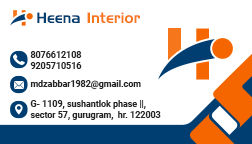
<style>
.page{position:relative;width:252px;height:144px;background:#ffffff}
.page>*{position:absolute;margin:0}
.t1{font:14.8px "HandelGothic";color:#f6761b}
.t2{font:14.8px "HandelGothic";color:#003e71}
.t3{font:8.9px "Roboto-Bold";color:#252525}
</style>
<div class="page">
<p class="t1" style="left:37px;top:12px;width:103px;height:12px"><span class="t2">Heena </span>Interior</p>
<p class="t3" style="left:30px;top:51px;width:52px;height:18px">8076612108<br>9205710516</p>
<p class="t3" style="left:30px;top:80px;width:111px;height:10px">mdzabbar1982@gmail.com</p>
<p class="t3" style="left:30px;top:100px;width:131px;height:20px">G- 1109, sushantlok phase ||,<br>sector 57, gurugram,  hr. 122003</p>
</div>
